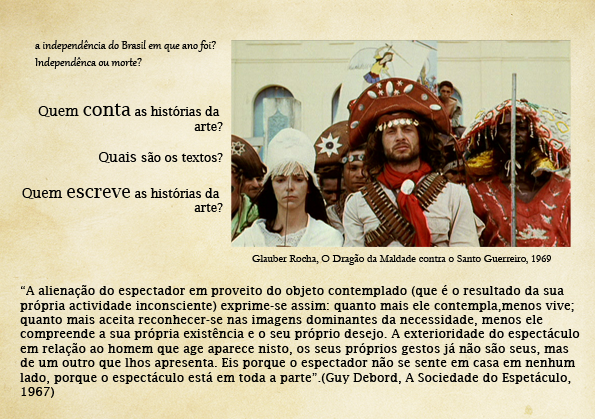
<style>
.page{position:relative;width:595px;height:419px}
.page>*{position:absolute;margin:0}
.t1{font:14px "Gabriola";color:#000000}
.t2{font:12px "LucidaBright";color:#000000}
.t3{font:11px "LucidaBright";color:#000000}
.t4{font:14px "LucidaBright";color:#000000}
.t5{font:18px "LucidaBright";color:#000000}
.t6{font:11px "Garamond";color:#000000}
.t7{font:12px "LucidaFax";color:#000000}
</style>
<div class="page">
<p class="t1" style="left:35px;top:40px;width:181px;height:29px">a independência do Brasil em que ano foi? <br>Independênca ou morte?</p>
<p class="t2" style="left:22px;top:103px;width:201px;height:109px;text-align:right"><span class="t3">   </span><span class="t4">Quem </span><span class="t5">conta</span> as histórias da <br>arte?<br><br>                     <span class="t4">  Quais </span>são os textos?<br><br><span class="t4">Quem </span><span class="t5">escreve</span> as histórias da <br>arte?</p>
<p class="t6" style="left:252px;top:254px;width:299px;height:11px">Glauber Rocha, O Dragão da Maldade contra o Santo Guerreiro, 1969</p>
<p class="t7" style="left:20px;top:285px;width:560px;height:113px">“A alienação do espectador em proveito do objeto contemplado (que é o resultado da sua <br>própria actividade inconsciente) exprime-se assim: quanto mais ele contempla,menos vive; <br>quanto mais aceita reconhecer-se nas imagens dominantes da necessidade, menos ele <br>compreende a sua própria existência e o seu próprio desejo. A exterioridade do espectáculo <br>em relação ao homem que age aparece nisto, os seus próprios gestos já não são seus, mas <br>de um outro que lhos apresenta. Eis porque o espectador não se sente em casa em nenhum <br>lado, porque o espectáculo está em toda a parte”.(Guy Debord, A Sociedade do Espetáculo, <br>1967)</p>
</div>
